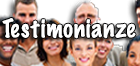
<style>
.page{position:relative;width:140px;height:66px;background:#ffffff}
.page>*{position:absolute;margin:0}
.t1{font:23px "MarkerFelt-Thin";color:#ffffff}
</style>
<div class="page">
<p class="t1" style="left:2px;top:18px;width:134px;height:21px">Testimonianze</p>
</div>
